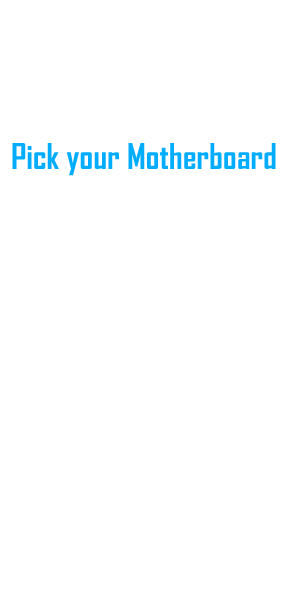
<style>
.page{position:relative;width:300px;height:600px;background:#ffffff}
.page>*{position:absolute;margin:0}
.t1{font:34px "AgencyFB-Bold";color:#02acfe}
</style>
<div class="page">
<p class="t1" style="left:12px;top:143px;width:264px;height:33px">Pick your Motherboard</p>
</div>
